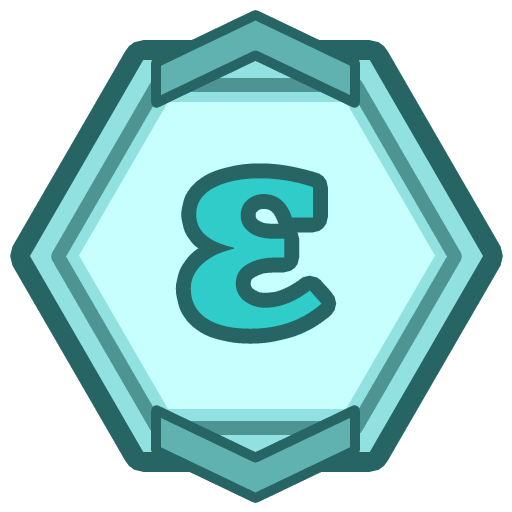
<style>
.page{position:relative;width:512px;height:512px;background:#ffffff}
.page>*{position:absolute;margin:0}
.t1{font:300px "Cambria-Bold";color:#2fccca}
</style>
<div class="page">
<p class="t1" style="left:190px;top:178px;width:132px;height:151px">ε</p>
</div>
